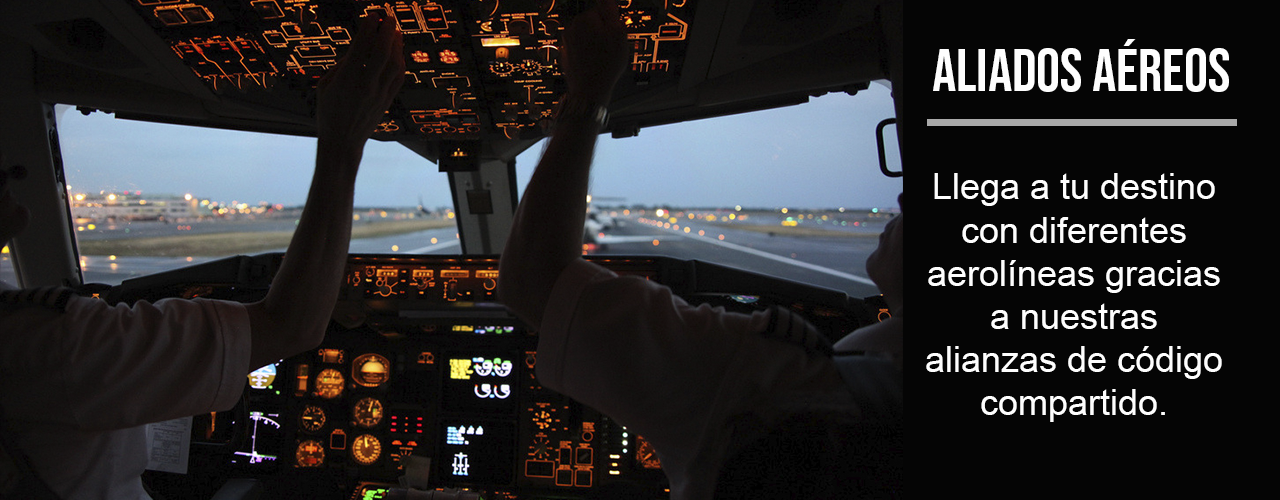
<style>
.page{position:relative;width:1280px;height:500px;background:#050505}
.page>*{position:absolute;margin:0}
.t1{font:60px "BebasNeue-Regular";color:#fefefe}
.t2{font:36px "ArialMT";color:#fefefe}
</style>
<div class="page">
<p class="t1" style="left:933px;top:39px;width:296px;height:53px">Aliados aéreos</p>
<p class="t2" style="left:926px;top:173px;width:296px;height:249px;text-align:center">Llega a tu destino con diferentes <br>aerolíneas gracias a nuestras <br>alianzas de código compartido.​</p>
</div>
